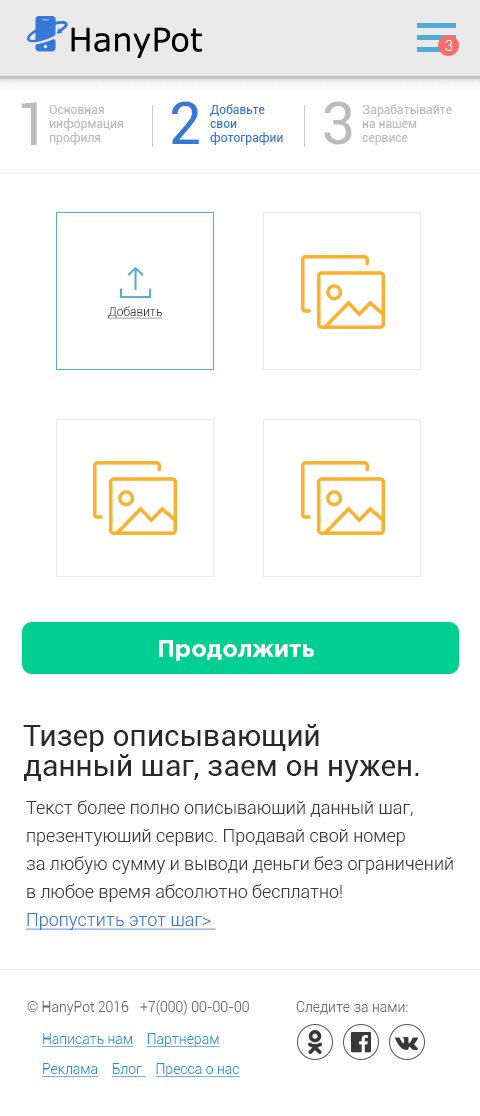
<style>
.page{position:relative;width:480px;height:1116px;background:#ffffff}
.page>*{position:absolute;margin:0}
.t1{font:14px "Roboto-Light";color:#ffffff}
.t2{font:60px "Roboto-Regular";color:#bcbcbc}
.t3{font:60px "Roboto-Regular";color:#3678d7}
.t4{font:12px "Roboto-Regular";color:#bcbcbc}
.t5{font:12px "Roboto-Regular";color:#3678d7}
.t6{font:12px "Roboto-Light";color:#393939;text-decoration:underline}
.t7{font:24px "GothamPro-Bold";color:#ffffff}
.t8{font:30px/30px "Roboto-Regular";color:#282828}
.t9{font:18px/28px "Roboto-Light";color:#393939}
.t10{font:18px/28px "Roboto-Light";color:#3678d7;text-decoration:underline}
.t11{font:14px "Roboto-Light";color:#696969}
.t12{font:14px/30px "Roboto-Light";color:#2196d1;text-decoration:underline}
.t13{font:14px "Roboto-Light";color:#2196d1;text-decoration:underline}
</style>
<div class="page">
<p class="t1" style="left:445px;top:40px;width:8px;height:11px">3</p>
<p class="t2" style="left:21px;top:102px;width:16px;height:43px">1</p>
<p class="t3" style="left:172px;top:101px;width:27px;height:43px">2</p>
<p class="t2" style="left:324px;top:101px;width:28px;height:44px">3</p>
<p class="t4" style="left:49px;top:105px;width:74px;height:40px">Основная <br>информация <br>профиля</p>
<p class="t5" style="left:210px;top:104px;width:73px;height:41px">Добавьте<br>свои<br>фотографии</p>
<p class="t4" style="left:362px;top:104px;width:90px;height:41px">Зарабатывайте<br>на нашем <br>сервисе</p>
<p class="t6" style="left:108px;top:306px;width:55px;height:13px">Добавить</p>
<p class="t7" style="left:159px;top:640px;width:155px;height:21px">Продолжить</p>
<p class="t8" style="left:23px;top:724px;width:396px;height:58px">Тизер описывающий<br>данный шаг, заем он нужен.</p>
<p class="t9" style="left:26px;top:800px;width:427px;height:130px">Текст более полно описывающий данный шаг, <br>презентующий сервис. Продавай свой номер <br>за любую сумму и выводи деньги без ограничений <br>в любое время абсолютно бесплатно!<br><span class="t10">Пропустить этот шаг&gt;</span></p>
<p class="t11" style="left:27px;top:1001px;width:102px;height:14px">© HanyPot 2016</p>
<p class="t11" style="left:140px;top:1000px;width:109px;height:15px">+7(000) 00-00-00</p>
<p class="t11" style="left:296px;top:1001px;width:112px;height:14px">Следите за нами:</p>
<p class="t12" style="left:42px;top:1033px;width:198px;height:44px"><span class="t13">Написать нам    </span>Партнерам    <br>Реклама    Блог    Пресса о нас</p>
</div>
